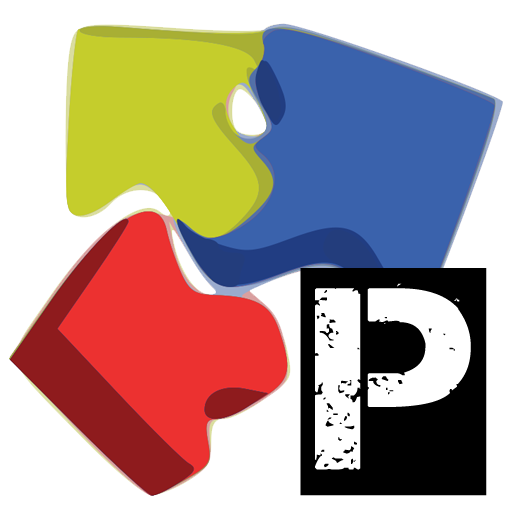
<style>
.page{position:relative;width:512px;height:512px;background:#ffffff}
.page>*{position:absolute;margin:0}
.t1{font:258px "Captureit2";color:#000000;scale:1.11 1}
</style>
<div class="page">
<p class="t1" style="left:300px;top:268px;width:187px;height:228px">P</p>
</div>
